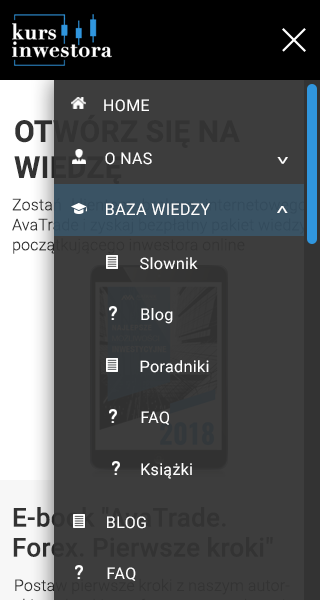
<style>
.page{position:relative;width:320px;height:600px;background:#3d3d3d}
.page>*{position:absolute;margin:0}
.t1{font:16px "Roboto-Regular";letter-spacing:0.02em;color:#ffffff;text-transform:uppercase}
.t2{font:24px "Roboto-Regular";letter-spacing:0.02em;color:#ffffff;text-transform:uppercase;scale:0.67 1}
.t3{font:24px "Roboto-Regular";letter-spacing:0.02em;color:#ffffff;text-transform:uppercase;scale:0.69 1}
.t4{font:15.7px "Roboto-Regular";letter-spacing:0.02em;color:#ffffff}
.t5{font:16px "Roboto-Regular";letter-spacing:0.02em;color:#ffffff}
</style>
<div class="page">
<p class="t1" style="left:104px;top:99px;width:45px;height:13px">Home</p>
<p class="t1" style="left:105px;top:152px;width:47px;height:13px">O nas</p>
<p class="t2" style="left:277px;top:157px;width:11px;height:7px;rotate:90deg">&gt;</p>
<p class="t1" style="left:106px;top:203px;width:104px;height:12px">baza wiedzy</p>
<p class="t3" style="left:277px;top:206px;width:11px;height:7px;rotate:-90deg">&gt;</p>
<p class="t4" style="left:140px;top:257px;width:58px;height:13px">Slownik</p>
<p class="t5" style="left:141px;top:308px;width:32px;height:16px"><span class="t1">B</span>log</p>
<p class="t4" style="left:140px;top:360px;width:69px;height:13px">Poradniki</p>
<p class="t1" style="left:141px;top:411px;width:28px;height:14px">FAQ</p>
<p class="t5" style="left:141px;top:463px;width:51px;height:16px">Książki</p>
<p class="t1" style="left:107px;top:516px;width:39px;height:13px">Blog</p>
<p class="t1" style="left:107px;top:567px;width:29px;height:14px">FAQ</p>
</div>
